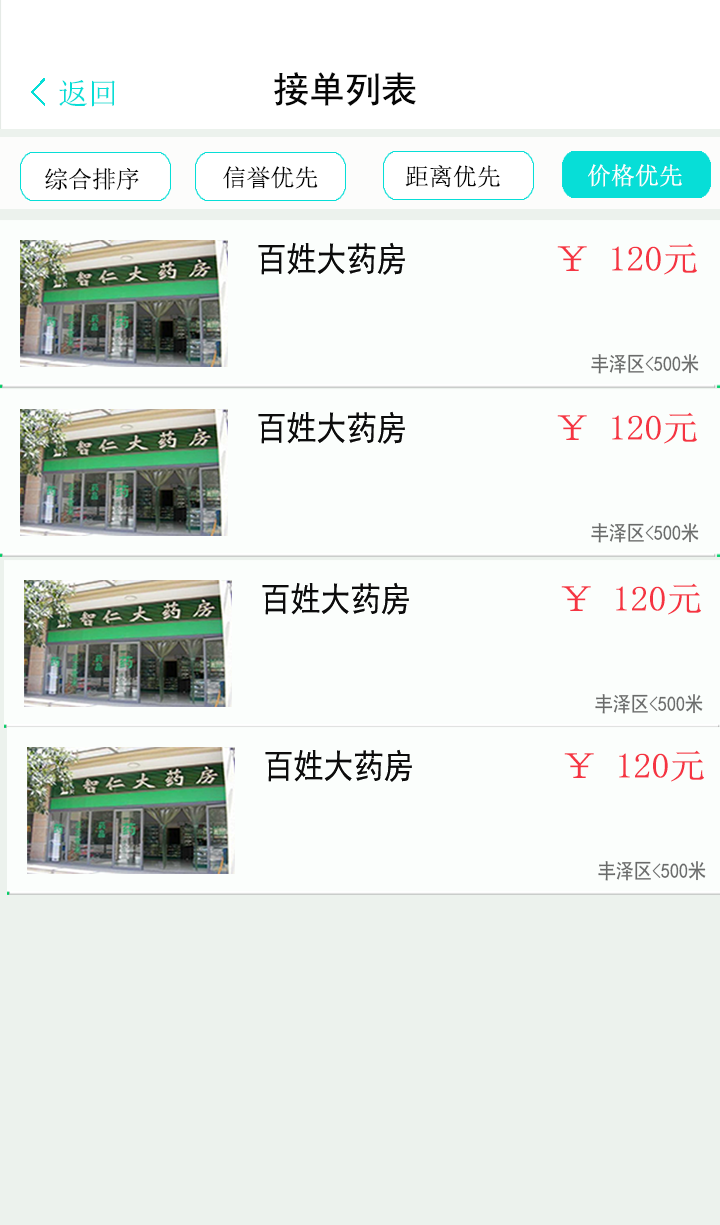
<style>
.page{position:relative;width:720px;height:1225px;background:#fbfefc}
.page>*{position:absolute;margin:0}
.t1{font:30px "SimSun";color:#07ded7}
.t2{font:24px "SimSun";color:#050505}
.t3{font:24px "SimSun";color:#ffffff}
.t4{font:34.2px "SimHei";color:#0c0c0c;scale:0.88 1}
.t5{font:34.9px "SimSun";color:#f53442;scale:1.03 1}
.t6{font:20.5px "SimHei";color:#696b6a;scale:0.88 1}
</style>
<div class="page">
<p class="t1" style="left:59px;top:80px;width:56px;height:27px">返回</p>
<p class="t2" style="left:45px;top:167px;width:94px;height:23px">综合排序</p>
<p class="t2" style="left:223px;top:166px;width:95px;height:23px">信誉优先</p>
<p class="t2" style="left:405px;top:165px;width:95px;height:23px">距离优先</p>
<p class="t3" style="left:588px;top:164px;width:94px;height:23px">价格优先</p>
<p class="t4" style="left:258px;top:242px;width:147px;height:33px">百姓大药房</p>
<p class="t4" style="left:258px;top:242px;width:147px;height:33px">百姓大药房</p>
<p class="t5" style="left:557px;top:243px;width:140px;height:32px">￥ 120元</p>
<p class="t6" style="left:591px;top:354px;width:108px;height:20px">丰泽区&lt;500米</p>
<p class="t4" style="left:258px;top:411px;width:147px;height:33px">百姓大药房</p>
<p class="t4" style="left:258px;top:411px;width:147px;height:33px">百姓大药房</p>
<p class="t5" style="left:557px;top:412px;width:140px;height:32px">￥ 120元</p>
<p class="t6" style="left:591px;top:523px;width:108px;height:20px">丰泽区&lt;500米</p>
<p class="t4" style="left:262px;top:582px;width:147px;height:33px">百姓大药房</p>
<p class="t4" style="left:262px;top:582px;width:147px;height:33px">百姓大药房</p>
<p class="t5" style="left:561px;top:583px;width:140px;height:32px">￥ 120元</p>
<p class="t6" style="left:595px;top:694px;width:108px;height:20px">丰泽区&lt;500米</p>
<p class="t4" style="left:265px;top:749px;width:147px;height:33px">百姓大药房</p>
<p class="t4" style="left:265px;top:749px;width:147px;height:33px">百姓大药房</p>
<p class="t5" style="left:564px;top:750px;width:140px;height:32px">￥ 120元</p>
<p class="t6" style="left:598px;top:861px;width:108px;height:20px">丰泽区&lt;500米</p>
</div>
